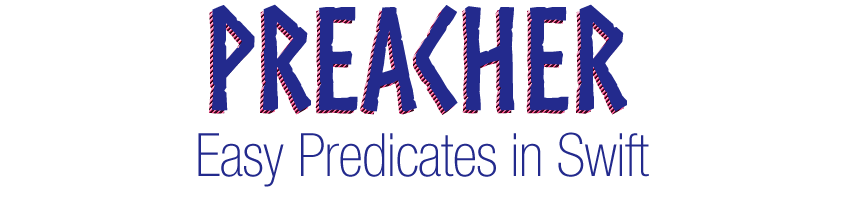
<style>
.page{position:relative;width:850px;height:197px;background:#ffffff}
.page>*{position:absolute;margin:0}
.t1{font:140px "Norse-Bold";letter-spacing:-0.01em;color:#232a8d}
.t2{font:60px "HelveticaNeueLTStd-ThCn";letter-spacing:-0.01em;color:#232a8d}
</style>
<div class="page">
<p class="t1" style="left:211px;top:4px;width:416px;height:108px">preacher</p>
<p class="t1" style="left:208px;top:7px;width:416px;height:108px">preacher</p>
<p class="t2" style="left:198px;top:132px;width:451px;height:55px">Easy Predicates in Swift</p>
</div>
